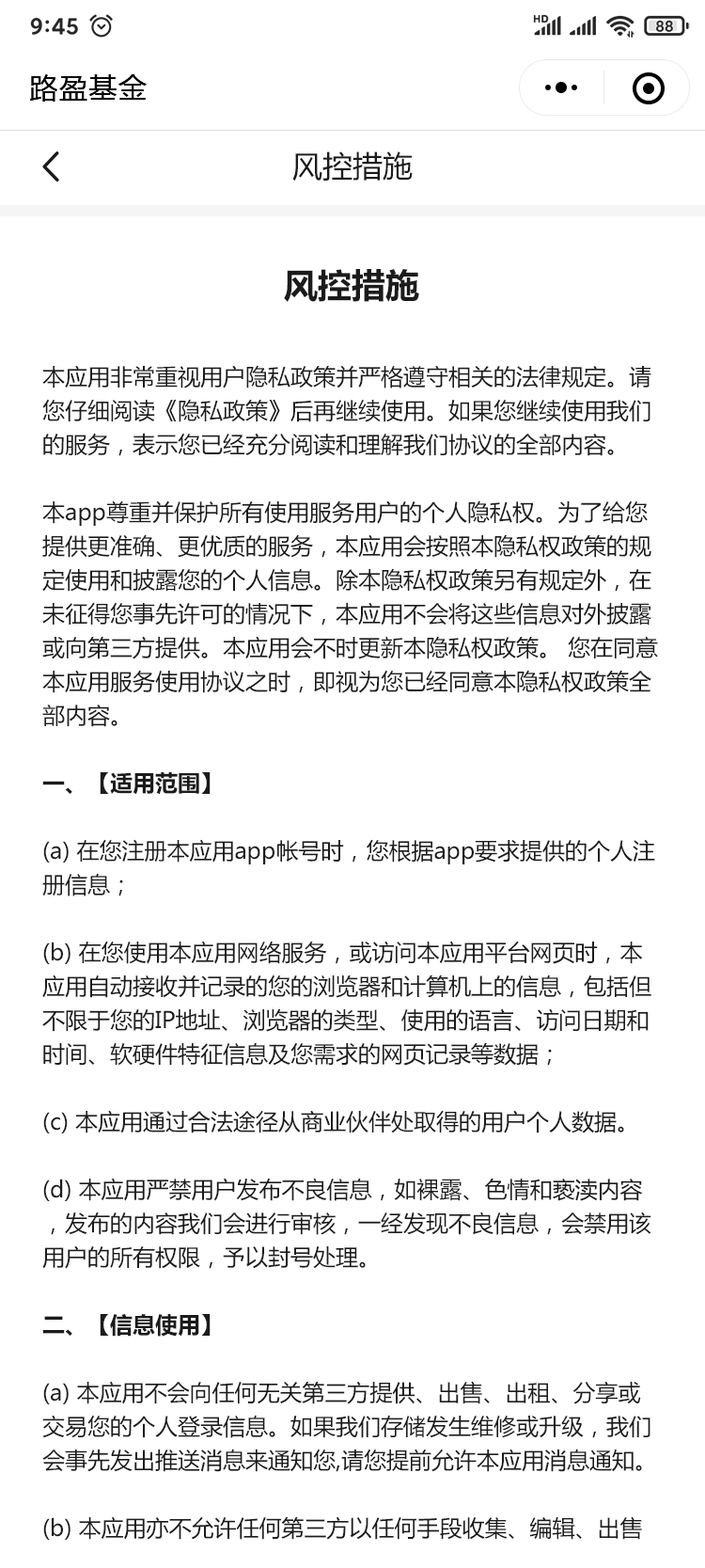
<style>
.page{position:relative;width:705px;height:1568px;background:#ffffff}
.page>*{position:absolute;margin:0}
.t1{font:28.2px "MicrosoftYaHei";letter-spacing:0.05em;color:#000000}
.t2{font:30.1px "MicrosoftYaHei";color:#1b1b1b}
.t3{font:33.9px "MicrosoftYaHei-Bold";color:#1b1b1b}
.t4{font:22.6px/33.9px "MicrosoftYaHei";color:#1b1b1b}
.t5{font:22.6px/33.9px "MicrosoftYaHei-Bold";color:#1b1b1b}
</style>
<div class="page">
<p class="t1" style="left:29px;top:74px;width:118px;height:28px">路盈基金</p>
<p class="t2" style="left:293px;top:151px;width:120px;height:31px">风控措施</p>
<p class="t3" style="left:284px;top:269px;width:136px;height:33px">风控措施</p>
<p class="t4" style="left:42px;top:365px;width:616px;height:1175px">本应用非常重视用户隐私政策并严格遵守相关的法律规定。请您仔细阅读《隐私政策》后再继续使用。如果您继续使用我们的服务，表示您已经充分阅读和理解我们协议的全部内容。<br><br>本app尊重并保护所有使用服务用户的个人隐私权。为了给您提供更准确、更优质的服务，本应用会按照本隐私权政策的规定使用和披露您的个人信息。除本隐私权政策另有规定外，在未征得您事先许可的情况下，本应用不会将这些信息对外披露或向第三方提供。本应用会不时更新本隐私权政策。 您在同意本应用服务使用协议之时，即视为您已经同意本隐私权政策全部内容。<br><br><span class="t5">一、【适用范围】<br></span><br>(a) 在您注册本应用app帐号时，您根据app要求提供的个人注册信息；<br><br>(b) 在您使用本应用网络服务，或访问本应用平台网页时，本应用自动接收并记录的您的浏览器和计算机上的信息，包括但不限于您的IP地址、浏览器的类型、使用的语言、访问日期和时间、软硬件特征信息及您需求的网页记录等数据；<br><br>(c) 本应用通过合法途径从商业伙伴处取得的用户个人数据。<br><br>(d) 本应用严禁用户发布不良信息，如裸露、色情和亵渎内容，发布的内容我们会进行审核，一经发现不良信息，会禁用该用户的所有权限，予以封号处理。<br><br><span class="t5">二、【信息使用】<br></span><br>(a) 本应用不会向任何无关第三方提供、出售、出租、分享或交易您的个人登录信息。如果我们存储发生维修或升级，我们会事先发出推送消息来通知您,请您提前允许本应用消息通知。<br><br>(b) 本应用亦不允许任何第三方以任何手段收集、编辑、出售或者无偿传播您的个人信息。任何本应用平台用户如从事上述活动，一经发现，本应用有权立即终止与该用户的服务协议。<br><br>(c) 为服务用户的目的，本应用可能通过使用您的个人信息，向您提供您感兴趣的信息，包括但不限于向您发出产品和服务信息，或者与本应用合作伙伴共享信息以便他们向您发送有关其产品和服务的信息（后者需要您的事先同意）。</p>
</div>
